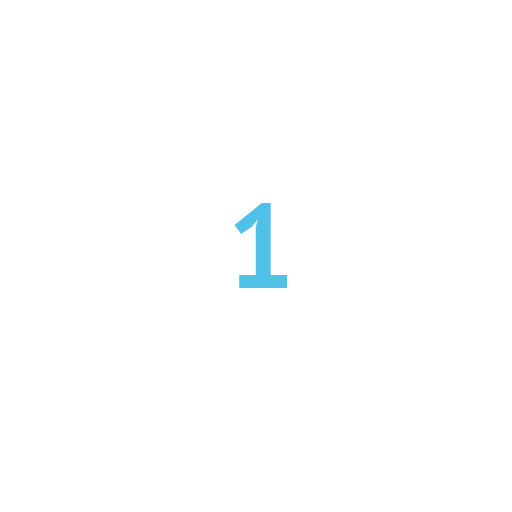
<style>
.page{position:relative;width:512px;height:512px;background:#ffffff}
.page>*{position:absolute;margin:0}
.t1{font:120px "PTSans-Bold";color:#4fc1e9}
</style>
<div class="page">
<p class="t1" style="left:234px;top:203px;width:53px;height:85px">1</p>
</div>
